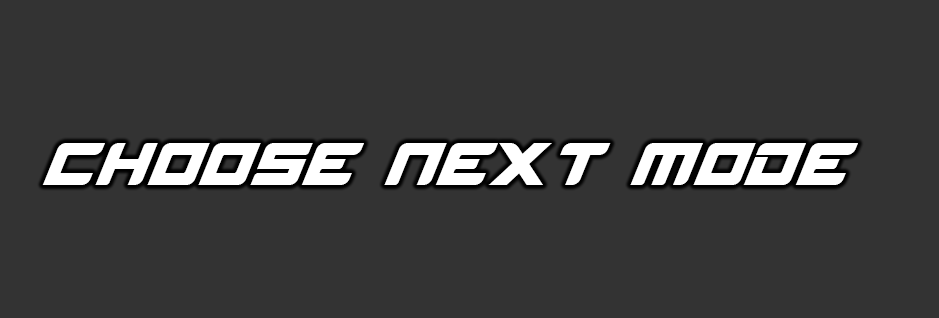
<style>
.page{position:relative;width:939px;height:318px;background:#333333}
.page>*{position:absolute;margin:0}
.t1{font:48px "SportypoReguler";color:#ffffff}
</style>
<div class="page">
<p class="t1" style="left:42px;top:143px;width:816px;height:42px">CHOOSE NEXT MODE</p>
</div>
